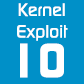
<style>
.page{position:relative;width:84px;height:84px;background:#0090c8}
.page>*{position:absolute;margin:0}
.t1{font:18px "ContinuumMedium";color:#ffffff}
.t2{font:48px "ContinuumBold";color:#ffffff}
</style>
<div class="page">
<p class="t1" style="left:17px;top:3px;width:51px;height:38px;text-align:center">Kernel<br>Exploit</p>
<p class="t2" style="left:20px;top:43px;width:44px;height:35px">10</p>
</div>
